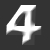
<style>
.page{position:relative;width:50px;height:50px;background:#333333}
.page>*{position:absolute;margin:0}
.t1{font:60px "ErasITC-Bold"}
</style>
<div class="page">
<p class="t1" style="left:6px;top:5px;width:36px;height:40px">4</p>
</div>
